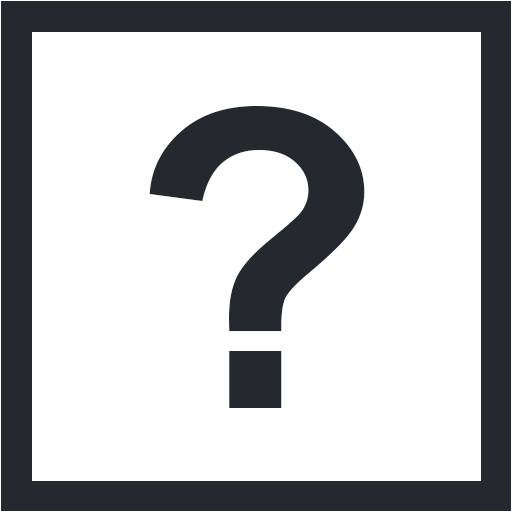
<style>
.page{position:relative;width:512px;height:512px;background:#ffffff}
.page>*{position:absolute;margin:0}
.t1{font:416.7px "Arial-BoldMT";color:#24292f}
</style>
<div class="page">
<p class="t1" style="left:149px;top:105px;width:216px;height:303px">?</p>
</div>
